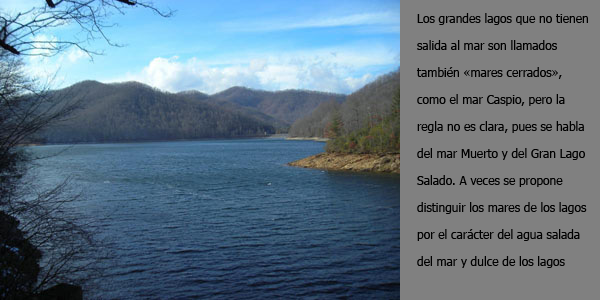
<style>
.page{position:relative;width:600px;height:300px;background:#808080}
.page>*{position:absolute;margin:0}
.t1{font:12px/27px "Tahoma";color:#000000}
</style>
<div class="page">
<p class="t1" style="left:417px;top:13px;width:171px;height:255px">Los grandes lagos que no tienen<br>salida al mar son llamados<br>también «mares cerrados», <br>como el mar Caspio, pero la <br>regla no es clara, pues se habla<br>del mar Muerto y del Gran Lago<br>Salado. A veces se propone <br>distinguir los mares de los lagos <br>por el carácter del agua salada<br>del mar y dulce de los lagos</p>
</div>
